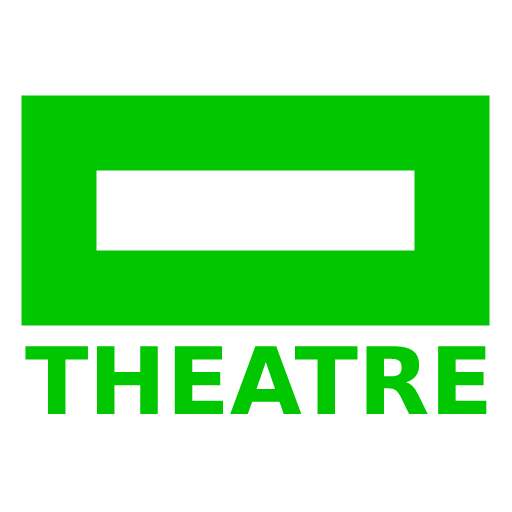
<style>
.page{position:relative;width:512px;height:512px;background:#ffffff}
.page>*{position:absolute;margin:0}
.t1{font:93px "DejaVuSans-Bold";color:#00c700}
</style>
<div class="page">
<p class="t1" style="left:25px;top:346px;width:462px;height:68px">THEATRE</p>
</div>
